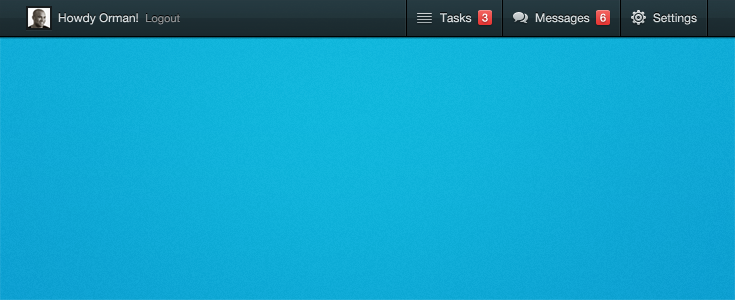
<style>
.page{position:relative;width:735px;height:300px}
.page>*{position:absolute;margin:0}
.t1{font:12px "HelveticaNeue";color:#d3dadc}
.t2{font:11px "HelveticaNeue";color:#8b8f91}
.t3{font:11px "HelveticaNeue";color:#ffffff}
</style>
<div class="page">
<p class="t1" style="left:58px;top:13px;width:122px;height:12px">Howdy Orman!  <span class="t2">Logout</span></p>
<p class="t1" style="left:440px;top:13px;width:32px;height:10px">Tasks</p>
<p class="t3" style="left:482px;top:13px;width:6px;height:9px">3</p>
<p class="t1" style="left:535px;top:13px;width:55px;height:12px">Messages</p>
<p class="t3" style="left:600px;top:13px;width:6px;height:9px">6</p>
<p class="t1" style="left:653px;top:13px;width:44px;height:12px">Settings</p>
</div>
